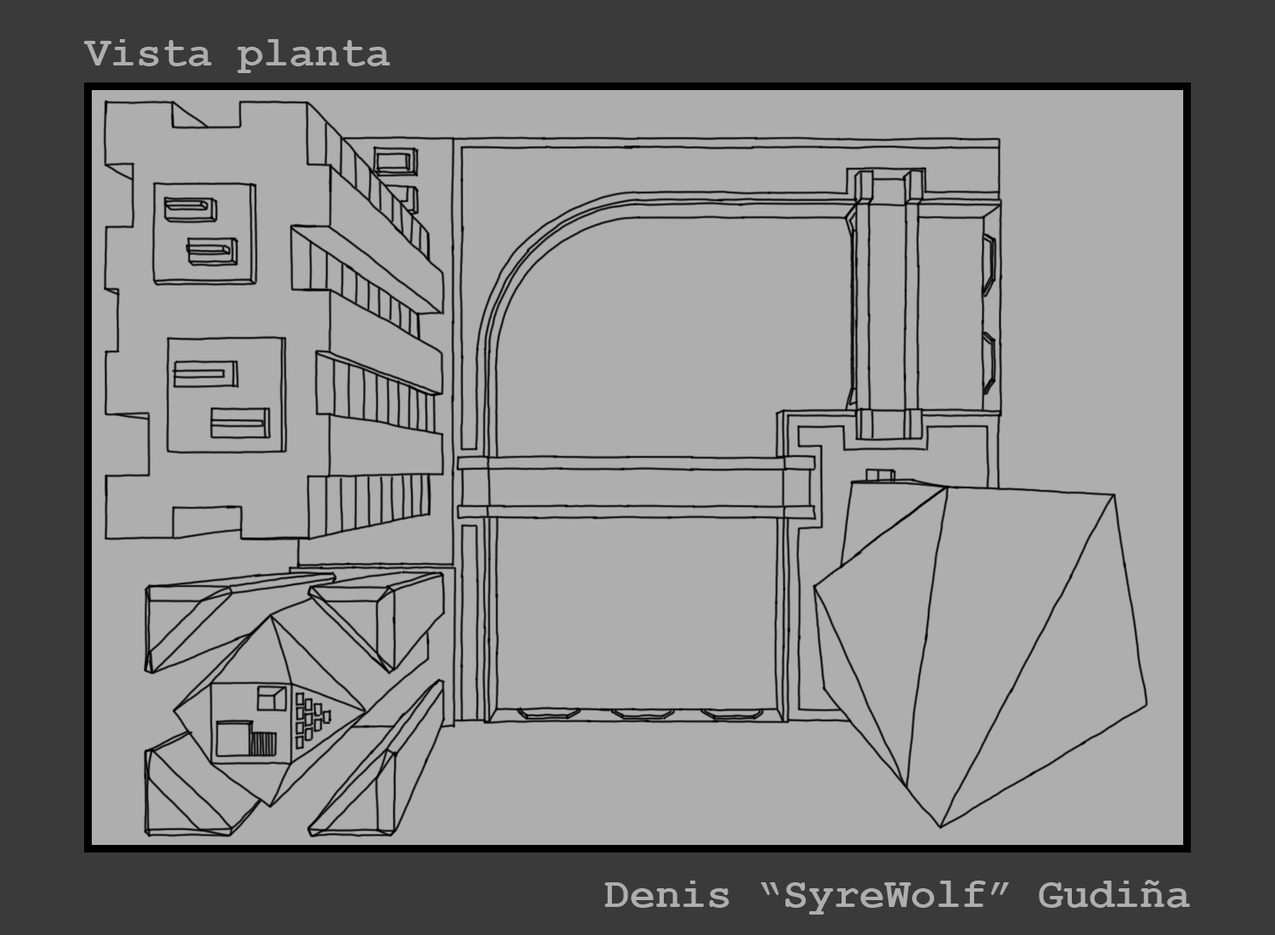
<style>
.page{position:relative;width:1275px;height:935px;background:#aeaeae}
.page>*{position:absolute;margin:0}
.t1{font:42.5px "CourierNewPS-BoldMT";color:#aeaeae}
</style>
<div class="page">
<p class="t1" style="left:83px;top:39px;width:307px;height:34px">Vista planta</p>
<p class="t1" style="left:604px;top:880px;width:586px;height:35px">Denis “SyreWolf” Gudiña</p>
</div>
